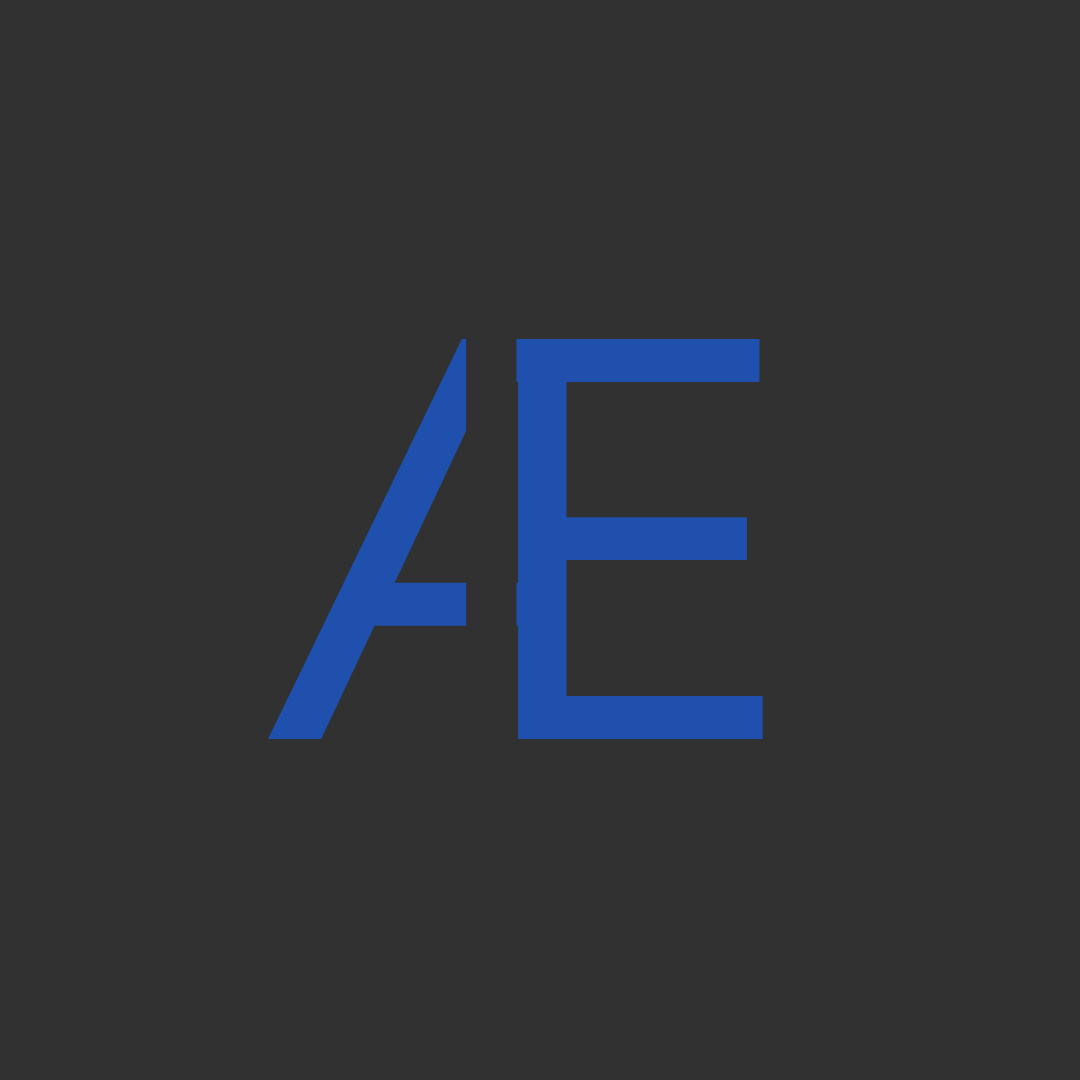
<style>
.page{position:relative;width:1080px;height:1080px;background:#313131}
.page>*{position:absolute;margin:0}
.t1{font:550px "InterV-Regular";color:#1f50ad}
.t2{font:570px "InterV-Regular";color:#313131}
</style>
<div class="page">
<p class="t1" style="left:268px;top:339px;width:495px;height:400px">Æ</p>
<p class="t2" style="left:466px;top:332px;width:51px;height:415px">I</p>
</div>
